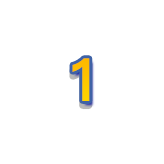
<style>
.page{position:relative;width:164px;height:164px;background:#ffffff}
.page>*{position:absolute;margin:0}
.t1{font:59.8px "PingFangHK-Semibold";color:#ffc200;text-transform:uppercase}
</style>
<div class="page">
<p class="t1" style="left:72px;top:58px;width:18px;height:43px">1</p>
</div>
